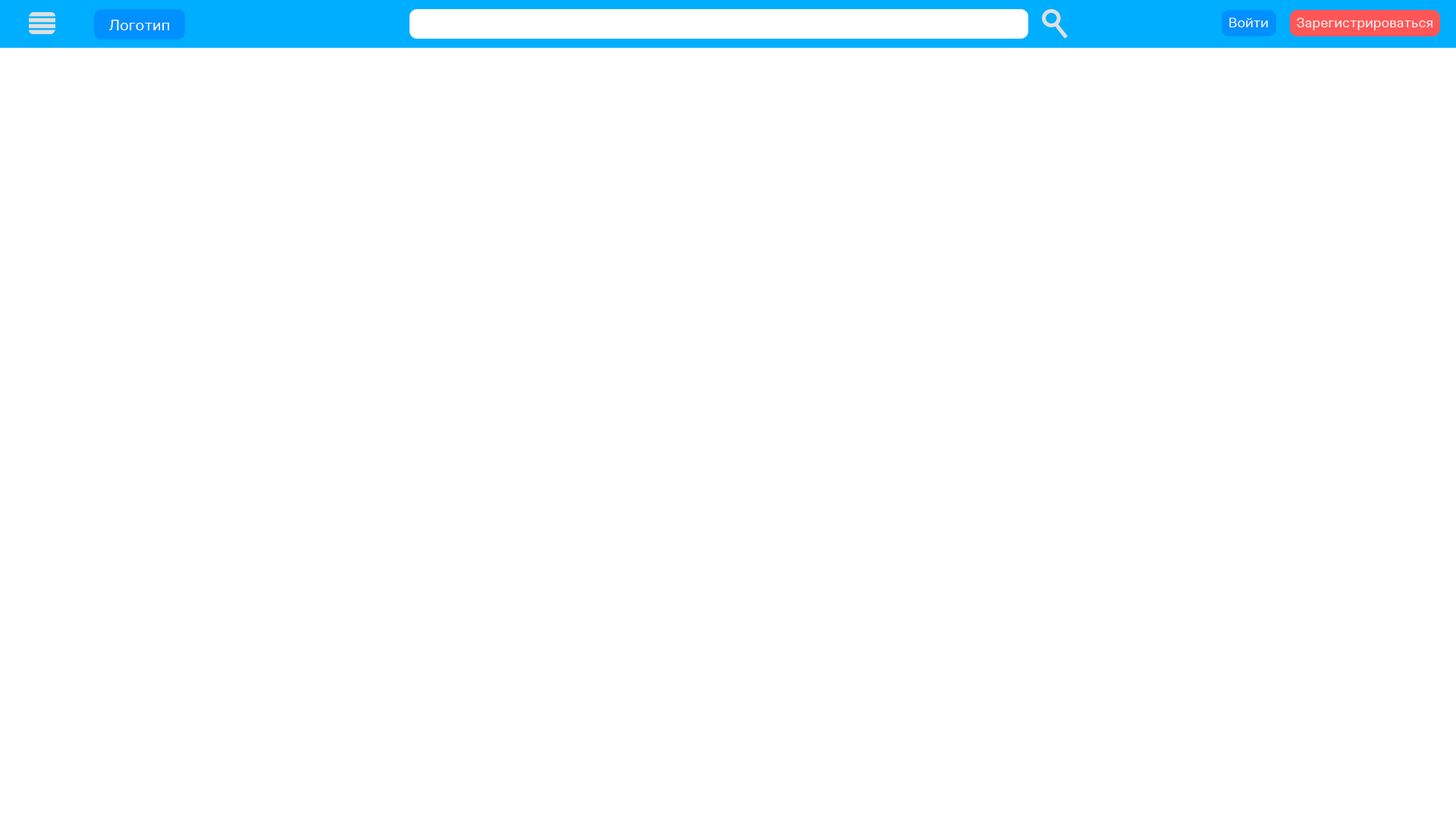
<style>
.page{position:relative;width:1456px;height:819px;background:#ffffff}
.page>*{position:absolute;margin:0}
.t1{font:13.6px "ClinicaPro-Regular";color:#ffffff}
.t2{font:15.2px "ClinicaPro-Regular";color:#ffffff}
</style>
<div class="page">
<p class="t1" style="left:1229px;top:17px;width:39px;height:10px">Войти</p>
<p class="t1" style="left:1297px;top:17px;width:135px;height:13px">Зарегистрироваться</p>
<p class="t2" style="left:109px;top:20px;width:60px;height:10px">Логотип</p>
</div>
